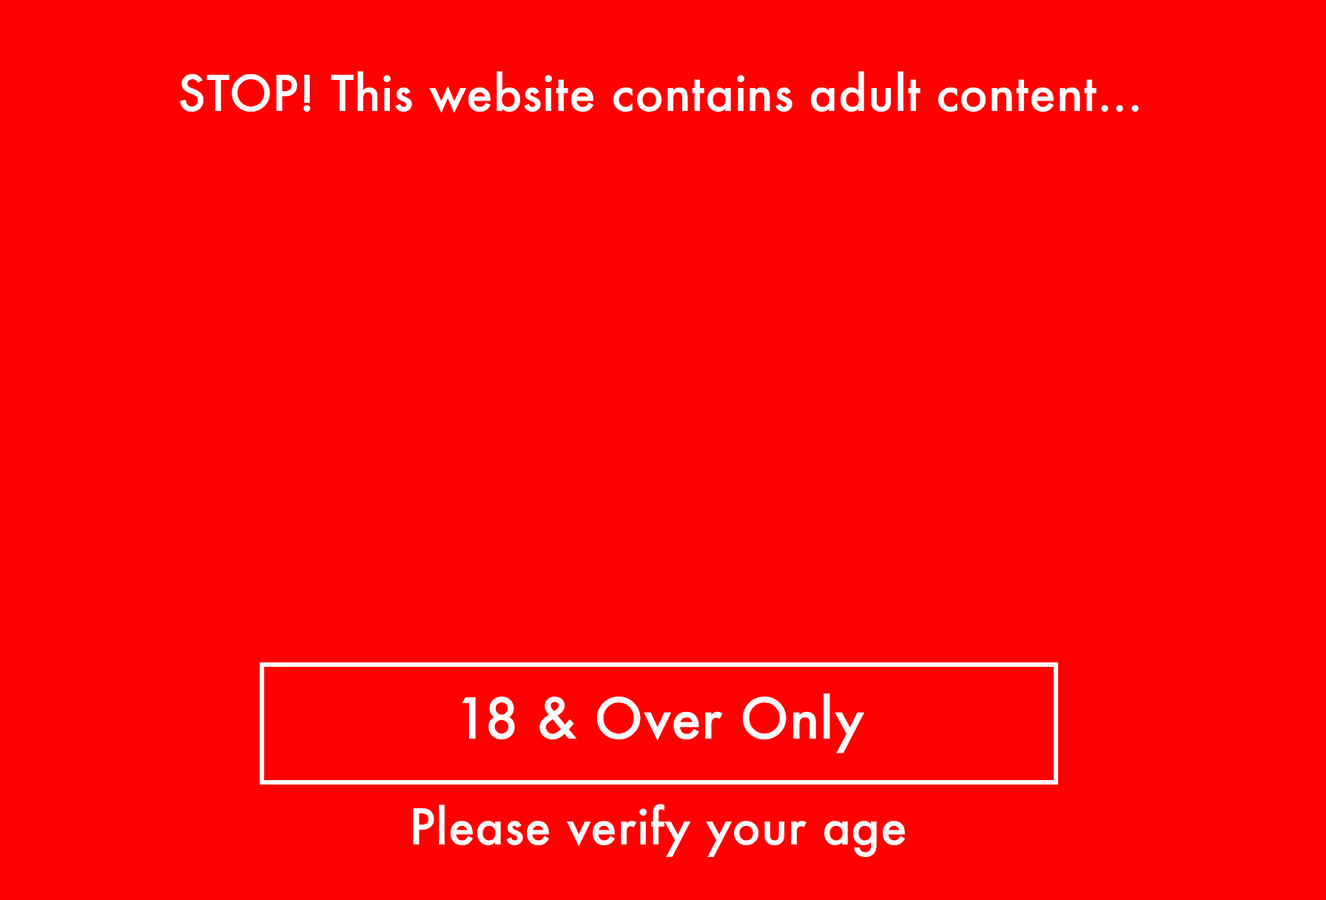
<style>
.page{position:relative;width:1326px;height:900px;background:#ff0000}
.page>*{position:absolute;margin:0}
.t1{font:48.1px "Futura-Medium";letter-spacing:0.01em;color:#ffffff}
.t2{font:54.7px "Futura-Medium";letter-spacing:0.01em;color:#ffffff}
</style>
<div class="page">
<p class="t1" style="left:180px;top:71px;width:958px;height:42px">STOP! This website contains adult content...</p>
<p class="t2" style="left:462px;top:693px;width:402px;height:60px">18 &amp; Over Only</p>
<p class="t1" style="left:413px;top:803px;width:492px;height:54px">Please verify your age</p>
</div>
